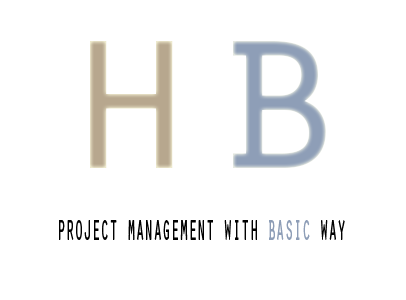
<style>
.page{position:relative;width:406px;height:300px;background:#ffffff}
.page>*{position:absolute;margin:0}
.t1{font:243.3px "OratorStd";color:#b7a78e}
.t2{font:243.3px "OratorStd";color:#8e9eb7}
.t3{font:36.7px "OratorStd";color:#010101;scale:0.4 1}
.t4{font:36.7px "OratorStd";color:#8e9eb7;scale:0.4 1}
</style>
<div class="page">
<p class="t1" style="left:90px;top:41px;width:236px;height:127px">h<span class="t2">b</span></p>
<p class="t3" style="left:59px;top:220px;width:286px;height:20px">project management wıth <span class="t4">basıc</span> way</p>
</div>
